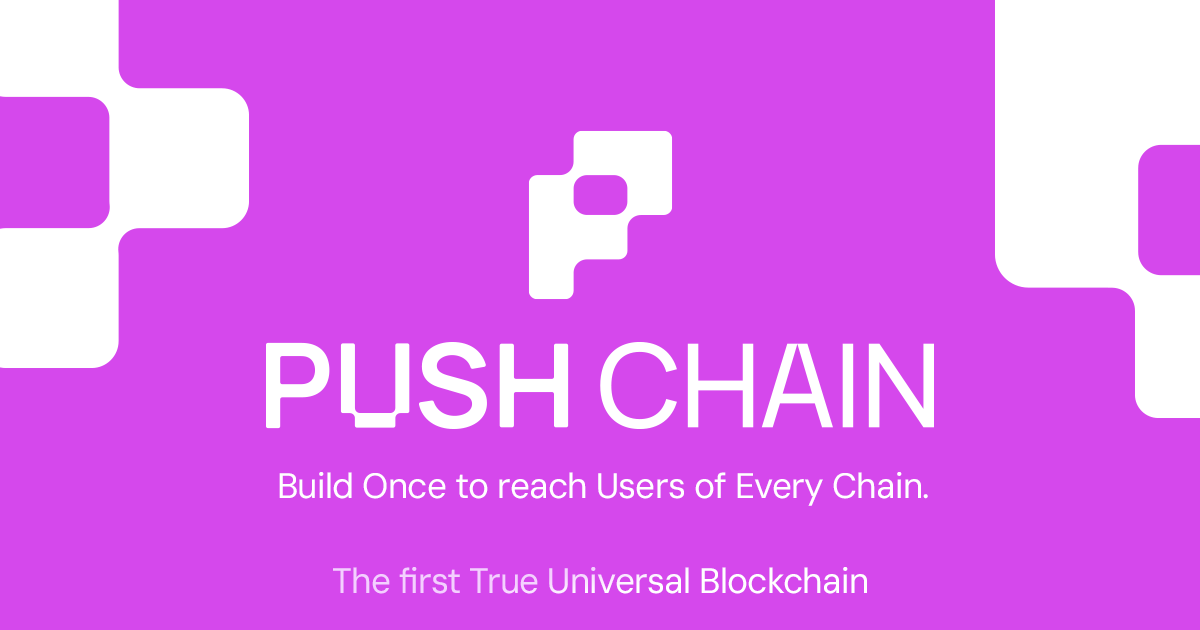
<style>
.page{position:relative;width:1200px;height:630px;background:#d548ec}
.page>*{position:absolute;margin:0}
.t1{font:35.3px "DMSans-Medium";letter-spacing:-0.02em;color:#ffffff}
.t2{font:35.3px "DMSans-Medium";letter-spacing:-0.02em}
</style>
<div class="page">
<p class="t1" style="left:279px;top:472px;width:649px;height:34px">Build Once to reach Users of Every Chain.</p>
<p class="t2" style="left:333px;top:567px;width:534px;height:27px">The first True Universal Blockchain</p>
</div>
